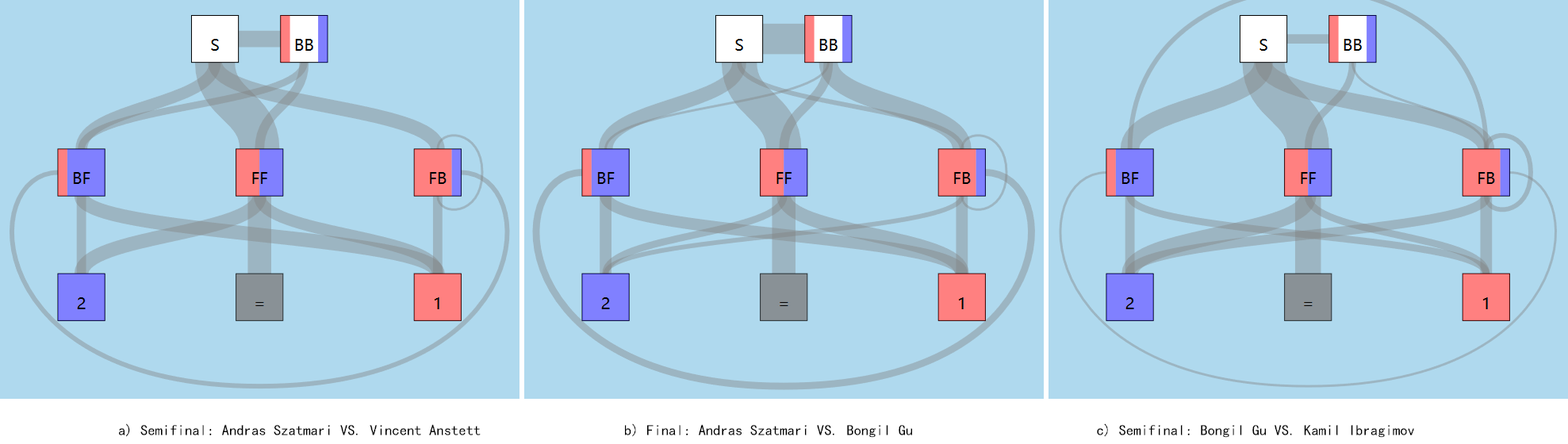
<style>
.page{position:relative;width:1568px;height:444px;background:#afd9ee}
.page>*{position:absolute;margin:0}
.t1{font:14.8px "¿¬Ìå";color:#000000}
</style>
<div class="page">
<p class="t1" style="left:119px;top:424px;width:362px;height:13px">a) Semifinal: Andras Szatmari VS. Vincent Anstett</p>
<p class="t1" style="left:625px;top:424px;width:287px;height:14px">b) Final: Andras Szatmari VS. Bongil Gu</p>
<p class="t1" style="left:1097px;top:424px;width:317px;height:14px">c) Semifinal: Bongil Gu VS. Kamil Ibragimov</p>
</div>
